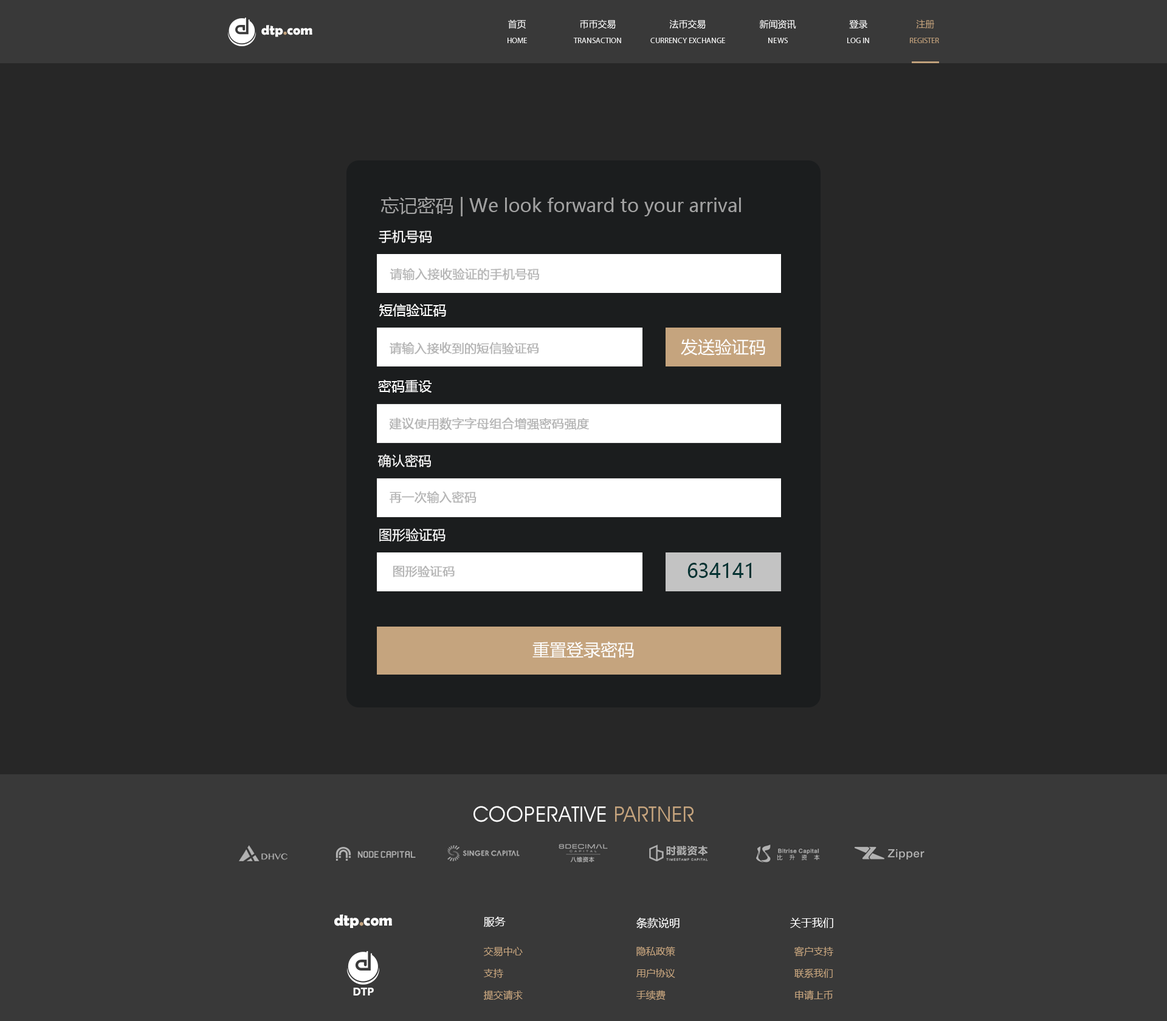
<style>
.page{position:relative;width:1167px;height:1021px;background:#272727}
.page>*{position:absolute;margin:0}
.t1{font:13.7px "BerlinSansFBDemi-Bold";color:#ffffff}
.t2{font:13.7px "BerlinSansFBDemi-Bold";color:#c5a47e}
.t3{font:9.1px "MicrosoftYaHei";color:#ffffff}
.t4{font:9.1px "MicrosoftYaHei";color:#c5a47e}
.t5{font:7.9px "MyriadPro-Regular";color:#ffffff;text-transform:uppercase}
.t6{font:7.9px "MyriadPro-Regular";color:#c5a47e;text-transform:uppercase}
.t7{font:18.2px "MicrosoftYaHei";color:#a2a2a2}
.t8{font:13.4px "MicrosoftYaHei";color:#ffffff}
.t9{font:12.1px "MicrosoftYaHei";color:#b6b6b6;font-weight:bold}
.t10{font:17px "MicrosoftYaHei";color:#ffffff}
.t11{font:12.2px "MicrosoftYaHei";color:#b6b6b6;font-weight:bold}
.t12{font:13.5px "MicrosoftYaHei";color:#ffffff}
.t13{font:19.7px "MicrosoftYaHei";color:#033333}
.t14{font:21.3px "AvantGardeITCbyBT-Book";letter-spacing:0.02em;color:#ffffff;text-transform:uppercase}
.t15{font:21.3px "AvantGardeITCbyBT-Book";letter-spacing:0.02em;color:#c5a47e;text-transform:uppercase}
.t16{font:15.9px "BerlinSansFBDemi-Bold";color:#ffffff}
.t17{font:15.9px "BerlinSansFBDemi-Bold";color:#c5a47e}
.t18{font:10.9px "MicrosoftYaHei";color:#ffffff}
.t19{font:9.7px "MicrosoftYaHei";color:#c5a47e}
.t20{font:11.1px "Ebrima-Bold";color:#ffffff}
</style>
<div class="page">
<p class="t1" style="left:261px;top:25px;width:52px;height:12px">dtp<span class="t2">.</span>com</p>
<p class="t3" style="left:508px;top:19px;width:427px;height:10px">首页                      币币交易                      法币交易                      新闻资讯                      登录                    <span class="t4">注册</span></p>
<p class="t5" style="left:508px;top:38px;width:19px;height:5px">home</p>
<p class="t5" style="left:573px;top:38px;width:48px;height:5px">transaction</p>
<p class="t5" style="left:651px;top:38px;width:74px;height:5px">Currency exchange</p>
<p class="t5" style="left:769px;top:38px;width:19px;height:5px">News</p>
<p class="t5" style="left:848px;top:38px;width:21px;height:5px">log in</p>
<p class="t6" style="left:910px;top:38px;width:29px;height:5px">register</p>
<p class="t7" style="left:381px;top:197px;width:360px;height:19px">忘记密码 | We look forward to your arrival</p>
<p class="t8" style="left:379px;top:230px;width:53px;height:13px">手机号码</p>
<p class="t9" style="left:390px;top:268px;width:149px;height:12px">请输入接收验证的手机号码</p>
<p class="t8" style="left:379px;top:304px;width:67px;height:13px">短信验证码</p>
<p class="t10" style="left:681px;top:339px;width:84px;height:17px">发送验证码</p>
<p class="t11" style="left:390px;top:342px;width:149px;height:12px">请输入接收到的短信验证码</p>
<p class="t8" style="left:378px;top:380px;width:54px;height:13px">密码重设</p>
<p class="t11" style="left:389px;top:418px;width:200px;height:12px">建议使用数字字母组合增强密码强度</p>
<p class="t8" style="left:378px;top:454px;width:53px;height:14px">确认密码</p>
<p class="t9" style="left:390px;top:491px;width:87px;height:12px">再一次输入密码</p>
<p class="t12" style="left:379px;top:528px;width:67px;height:14px">图形验证码</p>
<p class="t11" style="left:393px;top:566px;width:62px;height:12px">图形验证码</p>
<p class="t13" style="left:688px;top:563px;width:64px;height:15px">634141</p>
<p class="t10" style="left:533px;top:641px;width:101px;height:17px">重置登录密码</p>
<p class="t14" style="left:474px;top:806px;width:220px;height:17px">Cooperative <span class="t15">partner</span></p>
<p class="t16" style="left:334px;top:914px;width:58px;height:14px">dtp<span class="t17">.</span>com</p>
<p class="t18" style="left:484px;top:917px;width:22px;height:10px">服务</p>
<p class="t18" style="left:637px;top:917px;width:43px;height:12px">条款说明</p>
<p class="t18" style="left:790px;top:918px;width:44px;height:10px">关于我们</p>
<p class="t19" style="left:484px;top:947px;width:39px;height:10px">交易中心</p>
<p class="t19" style="left:637px;top:947px;width:39px;height:10px">隐私政策</p>
<p class="t19" style="left:794px;top:947px;width:40px;height:10px">客户支持</p>
<p class="t19" style="left:484px;top:969px;width:19px;height:9px">支持</p>
<p class="t19" style="left:637px;top:969px;width:39px;height:9px">用户协议</p>
<p class="t19" style="left:795px;top:969px;width:38px;height:10px">联系我们</p>
<p class="t20" style="left:353px;top:988px;width:21px;height:8px">DTP</p>
<p class="t19" style="left:484px;top:990px;width:39px;height:11px">提交请求</p>
<p class="t19" style="left:637px;top:990px;width:29px;height:11px">手续费</p>
<p class="t19" style="left:795px;top:990px;width:38px;height:10px">申请上币</p>
</div>
